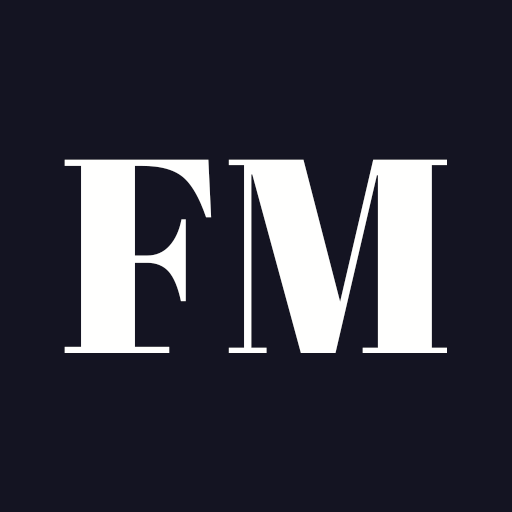
<style>
.page{position:relative;width:512px;height:512px;background:#141422}
.page>*{position:absolute;margin:0}
.t1{font:276px "AbrilFatface-Regular";color:#fffffe}
</style>
<div class="page">
<p class="t1" style="left:64px;top:159px;width:383px;height:194px">FM</p>
</div>
